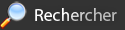
<style>
.page{position:relative;width:125px;height:30px;background:#333333}
.page>*{position:absolute;margin:0}
.t1{font:17.6px "MyriadPro-Regular"}
</style>
<div class="page">
<p class="t1" style="left:35px;top:8px;width:82px;height:13px">Rechercher</p>
</div>
